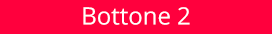
<style>
.page{position:relative;width:272px;height:34px;background:#ff003d}
.page>*{position:absolute;margin:0}
.t1{font:23.9px "OpenSans";color:#ffffff}
</style>
<div class="page">
<p class="t1" style="left:83px;top:7px;width:107px;height:18px">Bottone 2</p>
</div>
